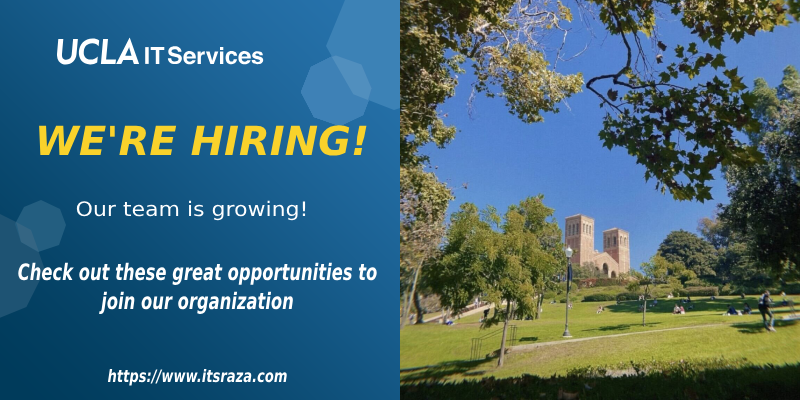
<style>
.page{position:relative;width:800px;height:400px}
.page>*{position:absolute;margin:0}
.t1{font:40px "DejaVuSans-BoldOblique";color:#f9d22b}
.t2{font:20px "DejaVuSans";color:#ffffff;scale:1.1 1}
.t3{font:22.7px/29.4px "DejaVuSans-BoldOblique";color:#ffffff;scale:0.72 1}
.t4{font:17.2px "DejaVuSans-BoldOblique";color:#ffffff;scale:0.76 1}
</style>
<div class="page">
<p class="t1" style="left:39px;top:125px;width:328px;height:31px">WE'RE HIRING!</p>
<p class="t2" style="left:76px;top:200px;width:230px;height:21px">Our team is growing!</p>
<p class="t3" style="left:18px;top:262px;width:359px;height:52px;text-align:center">Check out these great opportunities to<br>join our organization</p>
<p class="t4" style="left:107px;top:368px;width:180px;height:18px">https://www.itsraza.com</p>
</div>
